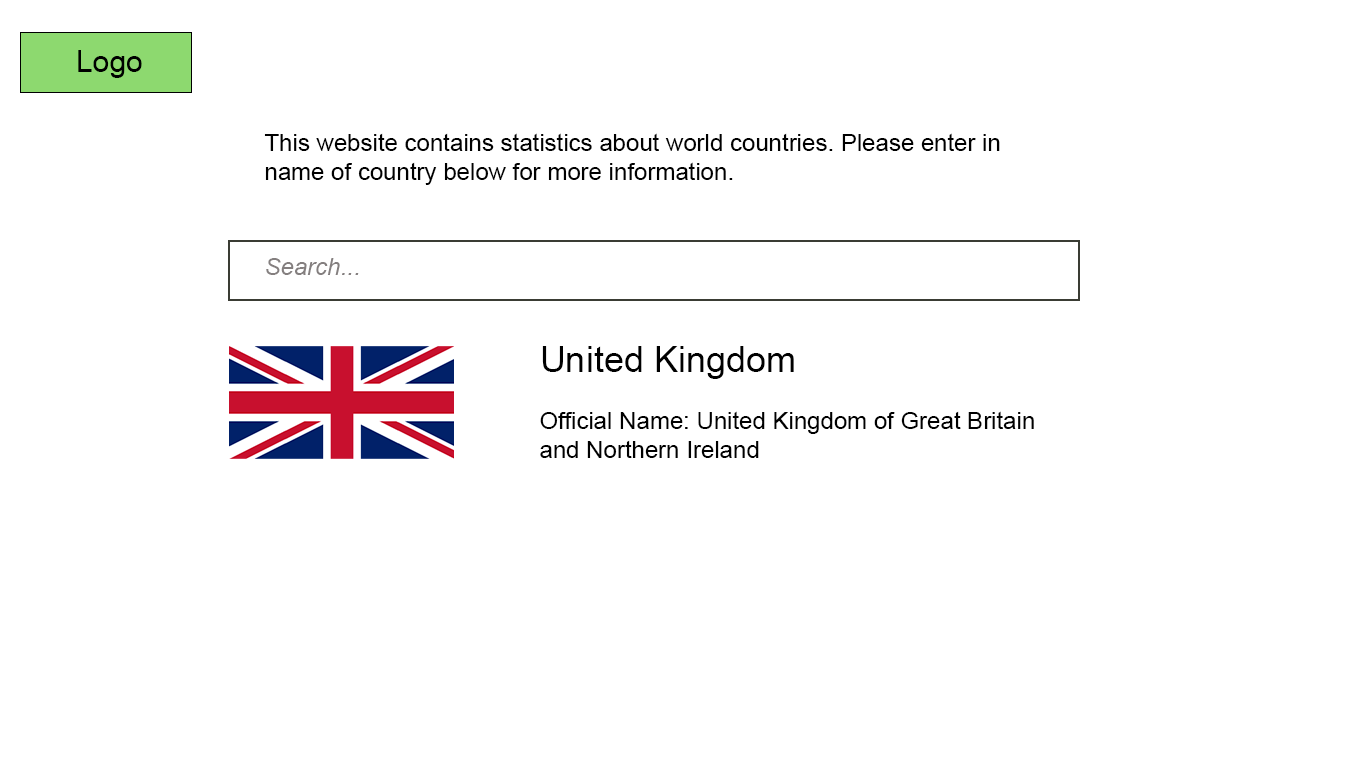
<style>
.page{position:relative;width:1366px;height:768px;background:#ffffff}
.page>*{position:absolute;margin:0}
.t1{font:30px "ArialMT";color:#000000}
.t2{font:24px "ArialMT";color:#000000}
.t3{font:24px "Arial-ItalicMT";color:#847f7f}
.t4{font:36px "ArialMT";color:#000000}
</style>
<div class="page">
<p class="t1" style="left:78px;top:50px;width:64px;height:28px">Logo</p>
<p class="t2" style="left:264px;top:133px;width:736px;height:52px">This website contains statistics about world countries. Please enter in name of country below for more information.</p>
<p class="t3" style="left:266px;top:258px;width:93px;height:17px"><span class="t2"><br></span>Search...</p>
<p class="t2" style="left:540px;top:346px;width:494px;height:112px"><span class="t4">United Kingdom <br></span><br>Official Name: United Kingdom of Great Britain and Northern Ireland</p>
</div>
